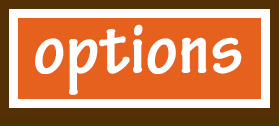
<style>
.page{position:relative;width:279px;height:126px;background:#e6611d}
.page>*{position:absolute;margin:0}
.t1{font:76px "TektonPro-BoldCond";color:#ffffff;scale:1.1 1}
</style>
<div class="page">
<p class="t1" style="left:35px;top:24px;width:207px;height:71px">options</p>
</div>
